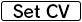
<style>
.page{position:relative;width:82px;height:22px;background:#ffffff}
.page>*{position:absolute;margin:0}
.t1{font:17px "RodinNTLGPro-DB";color:#000000}
</style>
<div class="page">
<p class="t1" style="left:13px;top:4px;width:57px;height:14px">Set CV</p>
</div>
